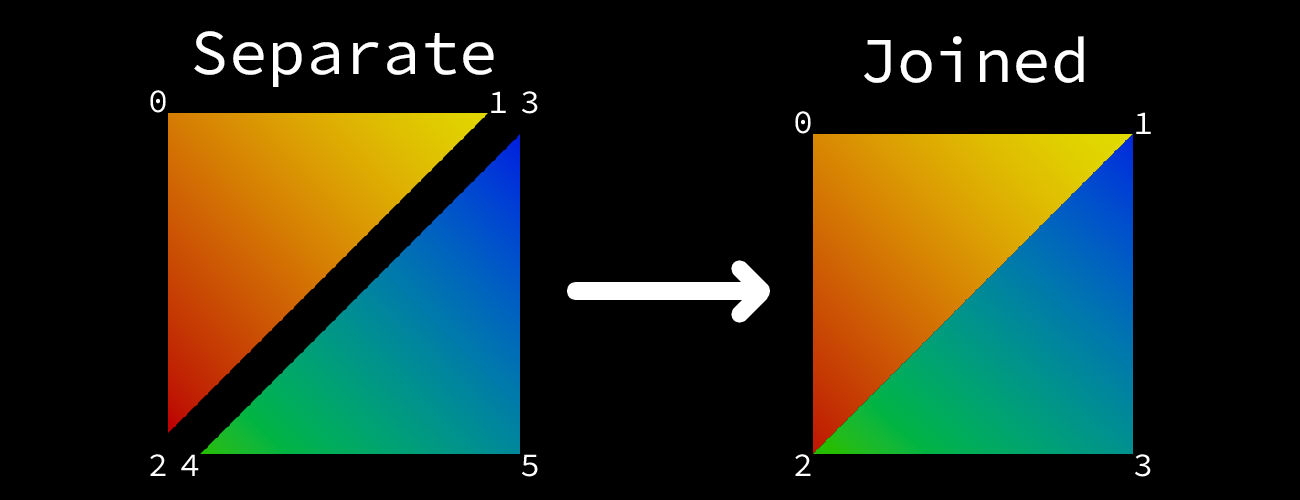
<style>
.page{position:relative;width:1300px;height:500px;background:#000000}
.page>*{position:absolute;margin:0}
.t1{font:64px "SauceCodeProNFM";color:#ffffff}
</style>
<div class="page">
<p class="t1" style="left:194px;top:31px;width:300px;height:56px">Separate</p>
<p class="t1" style="left:864px;top:36px;width:220px;height:47px">Joined</p>
</div>
